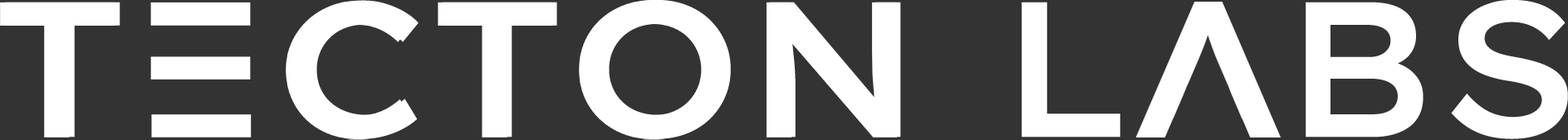
<style>
.page{position:relative;width:1568px;height:140px;background:#333333}
.page>*{position:absolute;margin:0}
.t1{font:192.7px "LexendExa-Medium";color:#ffffff}
</style>
<div class="page">
<p class="t1" style="left:5px;top:0px;width:1563px;height:140px">T  CTON L  BS</p>
</div>
